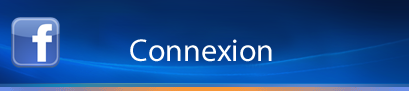
<style>
.page{position:relative;width:409px;height:91px}
.page>*{position:absolute;margin:0}
.t1{font:32px "MyriadPro-Regular";color:#ffffff}
</style>
<div class="page">
<p class="t1" style="left:130px;top:39px;width:142px;height:23px">Connexion</p>
</div>
